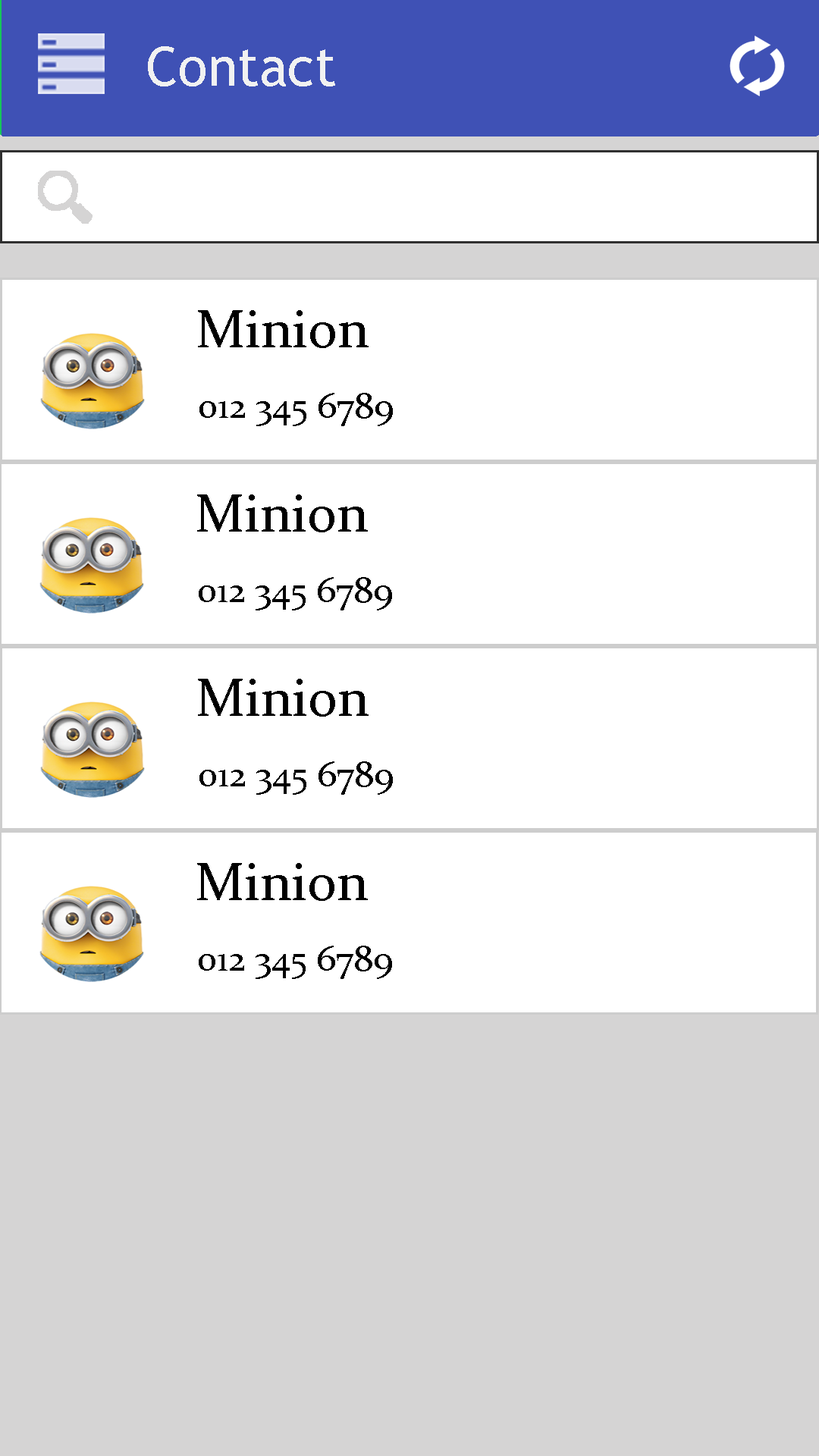
<style>
.page{position:relative;width:819px;height:1456px;background:#ffffff}
.page>*{position:absolute;margin:0}
.t1{font:54.6px "TrebuchetMS";color:#f1f1f1}
.t2{font:54.6px "Constantia";color:#000000}
.t3{font:36.4px "Constantia";color:#000000}
</style>
<div class="page">
<p class="t1" style="left:148px;top:46px;width:187px;height:40px">Contact</p>
<p class="t2" style="left:198px;top:310px;width:171px;height:38px">Minion</p>
<p class="t3" style="left:199px;top:393px;width:194px;height:33px">012 345 6789</p>
<p class="t2" style="left:197px;top:494px;width:171px;height:38px">Minion</p>
<p class="t3" style="left:199px;top:577px;width:193px;height:33px">012 345 6789</p>
<p class="t2" style="left:198px;top:679px;width:171px;height:38px">Minion</p>
<p class="t3" style="left:199px;top:761px;width:194px;height:34px">012 345 6789</p>
<p class="t2" style="left:197px;top:863px;width:171px;height:38px">Minion</p>
<p class="t3" style="left:199px;top:946px;width:193px;height:33px">012 345 6789</p>
</div>
